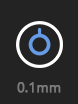
<style>
.page{position:relative;width:78px;height:104px;background:#232323}
.page>*{position:absolute;margin:0}
.t1{font:14px "SegoeUI";color:#7c7c7c;font-weight:bold}
</style>
<div class="page">
<p class="t1" style="left:17px;top:82px;width:44px;height:11px">0.1mm</p>
</div>
